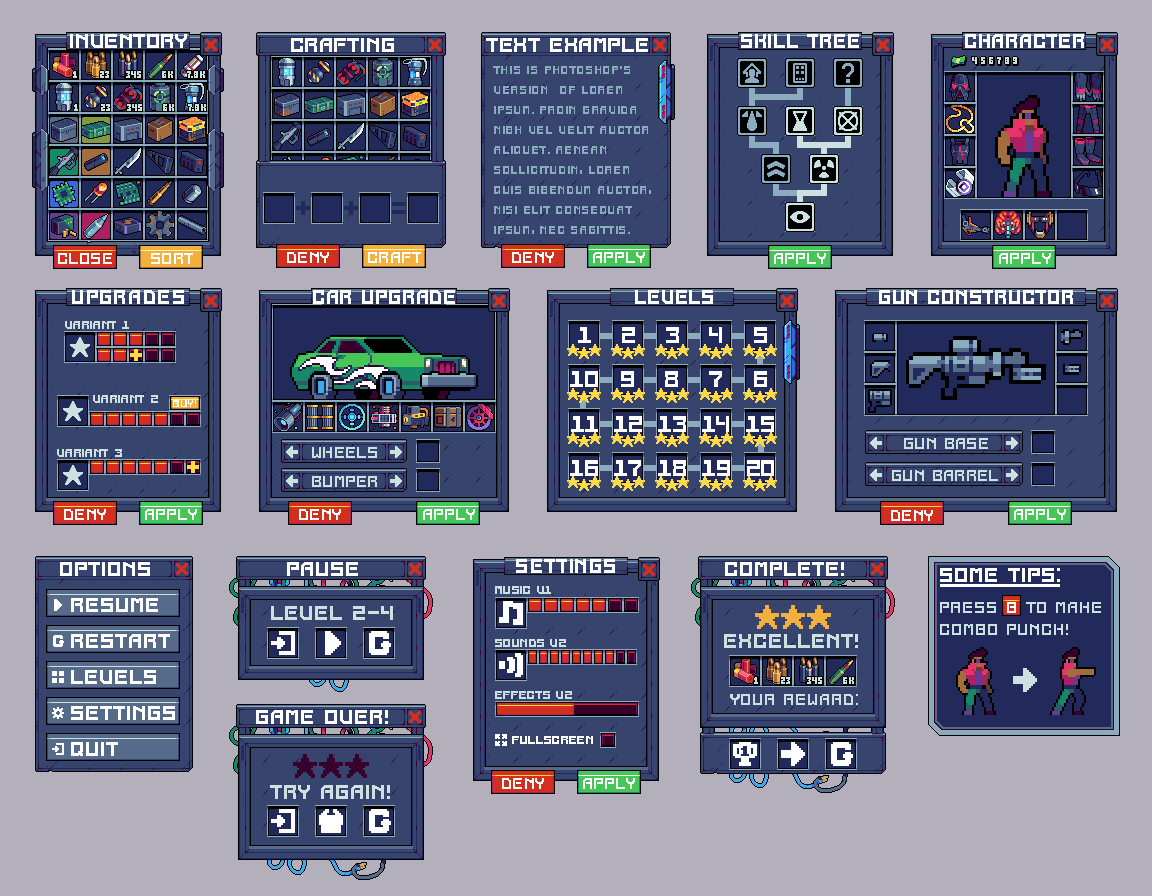
<style>
.page{position:relative;width:1152px;height:896px;background:#b3afbb}
.page>*{position:absolute;margin:0}
.t1{font:20px "CyberpunkCraftpixPixel";color:#ffffff}
.t2{font:20px "CyberpunkCraftpixPixel";color:#ffffff;scale:0.97 1}
.t3{font:20px "CyberpunkCraftpixPixel";color:#fefefe;scale:0.97 1}
.t4{font:12px/20px "CyberpunkCraftpixPixel";color:#8babbf;scale:0.96 1}
.t5{font:16px "CyberpunkCraftpixPixel";color:#ffffff;scale:0.97 1}
.t6{font:12px "CyberpunkCraftpixPixel";color:#cce2e1;scale:0.97 1}
.t7{font:23.4px "CyberpunkCraftpixPixel";color:#ffffff}
.t8{font:10px "CyberpunkCraftpixPixel";color:#ffffff}
.t9{font:16px "CyberpunkCraftpixPixel";color:#cce2e1;scale:0.97 1}
.t10{font:20px "CyberpunkCraftpixPixel";color:#cce2e1}
.t11{font:16px "CyberpunkCraftpixPixel";color:#cce2e1}
.t12{font:16px "CyberpunkCraftpixPixel";color:#ffffff}
.t13{font:12px "CyberpunkCraftpixPixel";color:#ffffff;scale:0.97 1}
</style>
<div class="page">
<p class="t1" style="left:70px;top:34px;width:117px;height:14px">Inventory</p>
<p class="t1" style="left:291px;top:38px;width:103px;height:14px">Crafting</p>
<p class="t1" style="left:486px;top:38px;width:162px;height:14px">Text example</p>
<p class="t2" style="left:741px;top:34px;width:118px;height:14px">Skill tree</p>
<p class="t3" style="left:965px;top:34px;width:119px;height:14px">Character</p>
<p class="t4" style="left:493px;top:66px;width:158px;height:168px">This is Photoshop's <br>version  of Lorem <br>Ipsum. Proin gravida <br>nibh vel velit auctor <br>aliquet. Aenean <br>sollicitudin, lorem <br>quis bibendum auctor, <br>nisi elit consequat <br>ipsum, nec sagittis.</p>
<p class="t5" style="left:58px;top:253px;width:54px;height:11px">Close</p>
<p class="t5" style="left:151px;top:253px;width:42px;height:11px">Sort</p>
<p class="t5" style="left:287px;top:252px;width:42px;height:11px">Deny</p>
<p class="t5" style="left:368px;top:252px;width:53px;height:11px">Craft</p>
<p class="t5" style="left:512px;top:252px;width:42px;height:11px">Deny</p>
<p class="t5" style="left:593px;top:252px;width:52px;height:11px">Apply</p>
<p class="t5" style="left:774px;top:253px;width:52px;height:11px">Apply</p>
<p class="t5" style="left:999px;top:253px;width:52px;height:11px">Apply</p>
<p class="t2" style="left:72px;top:290px;width:112px;height:14px">Upgrades</p>
<p class="t2" style="left:313px;top:290px;width:142px;height:14px">Car upgrade</p>
<p class="t2" style="left:635px;top:290px;width:78px;height:14px">Levels</p>
<p class="t2" style="left:879px;top:290px;width:194px;height:14px">Gun constructor</p>
<p class="t6" style="left:65px;top:321px;width:64px;height:8px">Variant 1</p>
<p class="t7" style="left:578px;top:327px;width:13px;height:16px">1</p>
<p class="t7" style="left:622px;top:327px;width:13px;height:16px">2</p>
<p class="t7" style="left:666px;top:327px;width:13px;height:16px">3</p>
<p class="t7" style="left:709px;top:327px;width:13px;height:16px">4</p>
<p class="t7" style="left:754px;top:327px;width:13px;height:16px">5</p>
<p class="t7" style="left:570px;top:371px;width:28px;height:16px">10</p>
<p class="t7" style="left:621px;top:371px;width:13px;height:16px">9</p>
<p class="t7" style="left:665px;top:371px;width:13px;height:16px">8</p>
<p class="t7" style="left:709px;top:371px;width:13px;height:16px">7</p>
<p class="t7" style="left:754px;top:371px;width:13px;height:16px">6</p>
<p class="t6" style="left:93px;top:395px;width:65px;height:8px">Variant 2</p>
<p class="t8" style="left:173px;top:400px;width:23px;height:7px">Buy!</p>
<p class="t7" style="left:571px;top:416px;width:27px;height:16px">11</p>
<p class="t7" style="left:614px;top:416px;width:28px;height:16px">12</p>
<p class="t7" style="left:658px;top:416px;width:28px;height:16px">13</p>
<p class="t7" style="left:702px;top:416px;width:27px;height:16px">14</p>
<p class="t7" style="left:746px;top:416px;width:28px;height:16px">15</p>
<p class="t9" style="left:904px;top:438px;width:84px;height:11px">Gun base</p>
<p class="t6" style="left:57px;top:449px;width:65px;height:8px">Variant 3</p>
<p class="t9" style="left:312px;top:447px;width:65px;height:11px">Wheels</p>
<p class="t7" style="left:570px;top:460px;width:28px;height:16px">16</p>
<p class="t7" style="left:614px;top:460px;width:27px;height:16px">17</p>
<p class="t7" style="left:658px;top:460px;width:28px;height:16px">18</p>
<p class="t7" style="left:702px;top:460px;width:28px;height:16px">19</p>
<p class="t7" style="left:747px;top:460px;width:27px;height:16px">20</p>
<p class="t9" style="left:892px;top:470px;width:106px;height:11px">Gun barrel</p>
<p class="t9" style="left:312px;top:476px;width:65px;height:11px">Bumper</p>
<p class="t5" style="left:64px;top:509px;width:42px;height:11px">Deny</p>
<p class="t5" style="left:145px;top:509px;width:52px;height:11px">Apply</p>
<p class="t5" style="left:299px;top:509px;width:42px;height:11px">Deny</p>
<p class="t5" style="left:423px;top:509px;width:52px;height:11px">Apply</p>
<p class="t5" style="left:891px;top:510px;width:42px;height:11px">Deny</p>
<p class="t5" style="left:1014px;top:509px;width:52px;height:11px">Apply</p>
<p class="t1" style="left:60px;top:562px;width:90px;height:14px">options</p>
<p class="t1" style="left:287px;top:562px;width:71px;height:14px">pause</p>
<p class="t2" style="left:516px;top:559px;width:99px;height:14px">settings</p>
<p class="t1" style="left:725px;top:562px;width:119px;height:14px">complete!</p>
<p class="t1" style="left:940px;top:568px;width:120px;height:14px">some tips:</p>
<p class="t6" style="left:495px;top:586px;width:56px;height:8px">music v1</p>
<p class="t1" style="left:71px;top:598px;width:87px;height:14px">resume</p>
<p class="t10" style="left:271px;top:606px;width:122px;height:14px">level 2-4</p>
<p class="t11" style="left:940px;top:602px;width:161px;height:11px">press    to make</p>
<p class="t12" style="left:1007px;top:602px;width:9px;height:11px">b</p>
<p class="t11" style="left:940px;top:624px;width:128px;height:11px">combo punch!</p>
<p class="t1" style="left:71px;top:634px;width:99px;height:14px">restart</p>
<p class="t6" style="left:495px;top:639px;width:71px;height:8px">sounds v2</p>
<p class="t10" style="left:724px;top:634px;width:134px;height:14px">excellent!</p>
<p class="t1" style="left:71px;top:670px;width:85px;height:14px">levels</p>
<p class="t6" style="left:495px;top:691px;width:77px;height:8px">effects v2</p>
<p class="t11" style="left:730px;top:694px;width:128px;height:11px">Your reward:</p>
<p class="t1" style="left:71px;top:706px;width:104px;height:14px">settings</p>
<p class="t1" style="left:256px;top:710px;width:132px;height:14px">game over!</p>
<p class="t13" style="left:512px;top:736px;width:81px;height:8px">fullscreen</p>
<p class="t1" style="left:71px;top:742px;width:47px;height:14px">quit</p>
<p class="t10" style="left:270px;top:785px;width:120px;height:14px">try again!</p>
<p class="t5" style="left:502px;top:778px;width:42px;height:11px">Deny</p>
<p class="t5" style="left:583px;top:778px;width:52px;height:11px">Apply</p>
</div>
